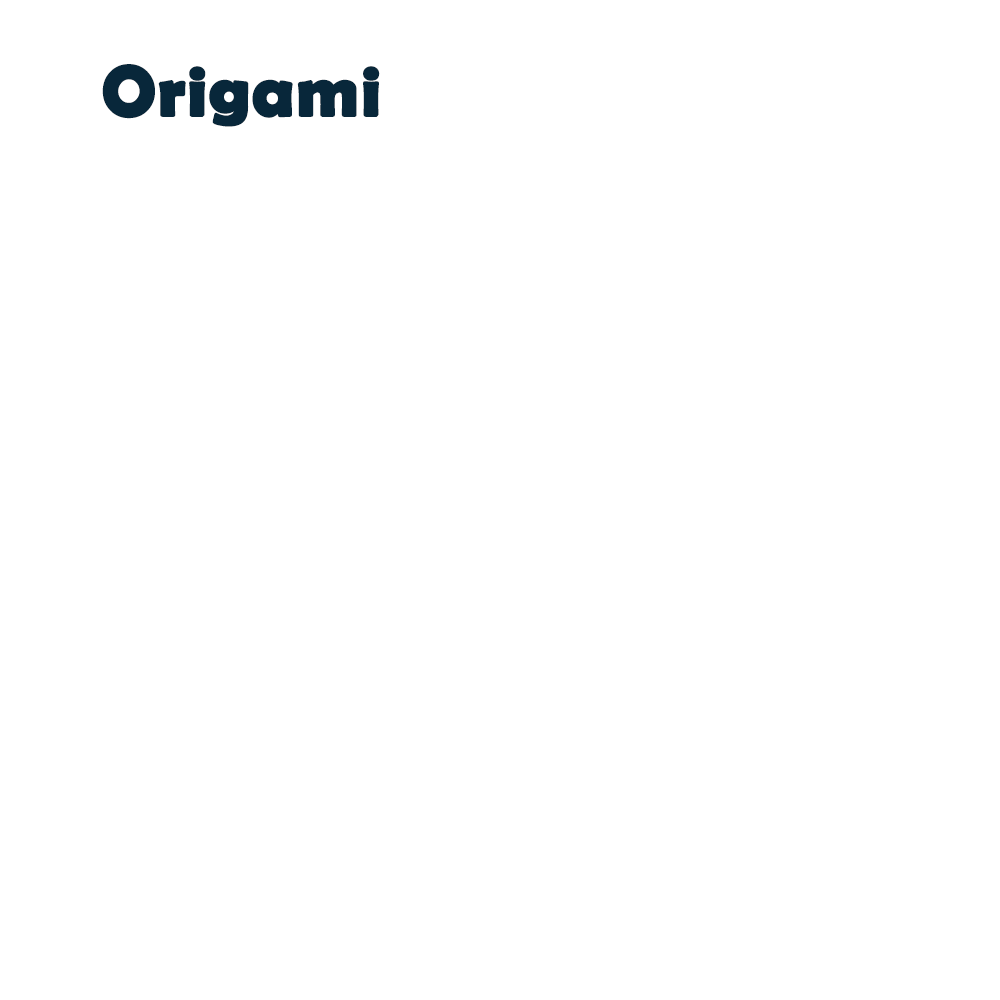
<style>
.page{position:relative;width:1000px;height:1000px;background:#ffffff}
.page>*{position:absolute;margin:0}
.t1{font:72px "BerlinSansFBDemi-Bold";color:#08273a;font-weight:bold}
</style>
<div class="page">
<p class="t1" style="left:102px;top:64px;width:278px;height:63px">Origami</p>
</div>
